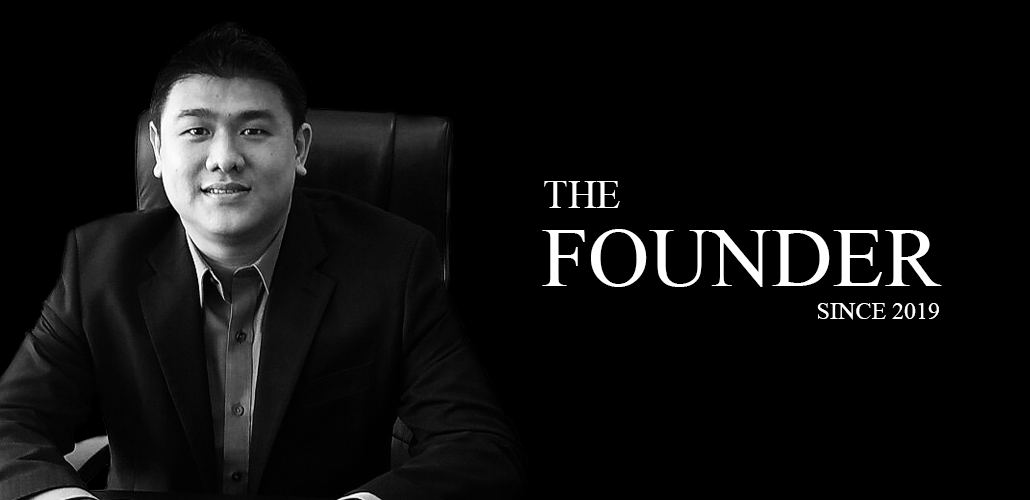
<style>
.page{position:relative;width:1030px;height:500px;background:#000000}
.page>*{position:absolute;margin:0}
.t1{font:40.1px "TimesNewRomanPSMT";color:#ffffff}
.t2{font:84.6px "TimesNewRomanPSMT";color:#ffffff}
.t3{font:24.1px "TimesNewRomanPSMT";color:#ffffff}
</style>
<div class="page">
<p class="t1" style="left:544px;top:181px;width:76px;height:27px">THE</p>
<p class="t2" style="left:542px;top:229px;width:400px;height:58px">FOUNDER</p>
<p class="t3" style="left:817px;top:303px;width:122px;height:17px">SINCE 2019</p>
</div>
